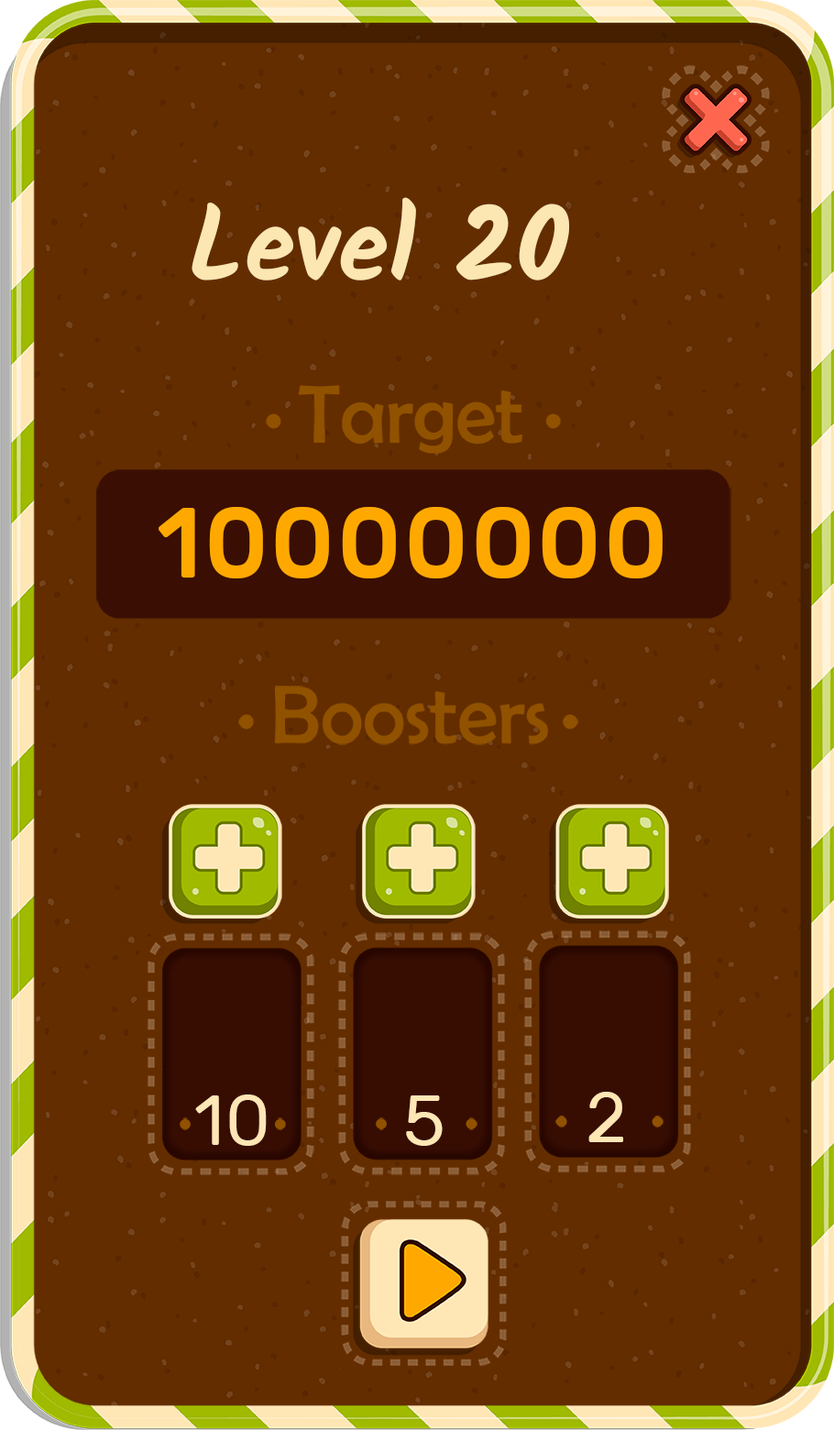
<style>
.page{position:relative;width:834px;height:1430px;background:#632d00}
.page>*{position:absolute;margin:0}
.t1{font:103.3px "Kalam-Bold";color:#fce6b2}
.t2{font:98.7px "Rubik-Medium";letter-spacing:0.025em;color:#ffa900}
.t3{font:70.3px "Rubik-Regular";letter-spacing:0.025em;color:#ffe6b5}
</style>
<div class="page">
<p class="t1" style="left:192px;top:197px;width:378px;height:83px">Level 20</p>
<p class="t2" style="left:159px;top:507px;width:504px;height:71px">10000000</p>
<p class="t3" style="left:195px;top:1094px;width:72px;height:52px">10</p>
<p class="t3" style="left:406px;top:1095px;width:37px;height:51px">5</p>
<p class="t3" style="left:588px;top:1092px;width:35px;height:50px">2</p>
</div>
